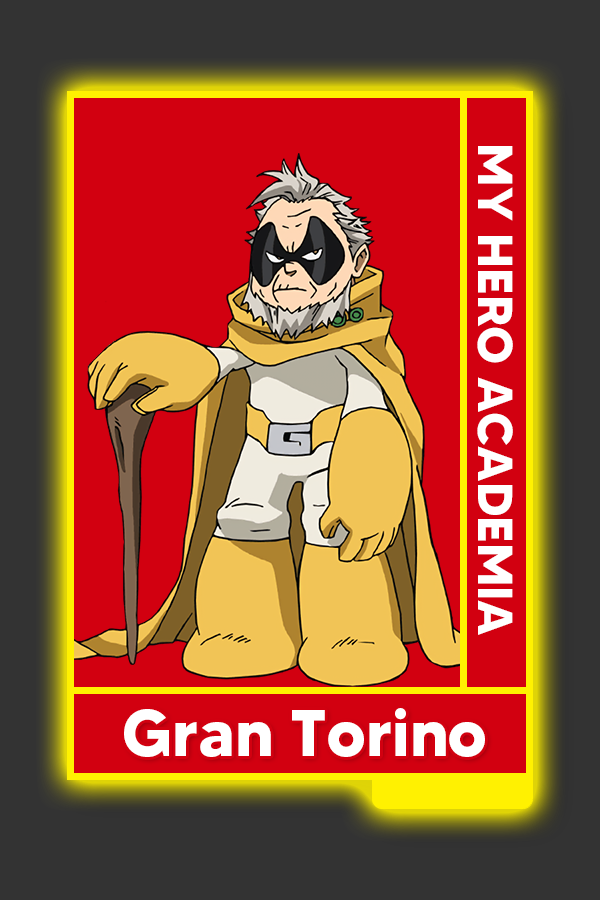
<style>
.page{position:relative;width:600px;height:900px;background:#d20010}
.page>*{position:absolute;margin:0}
.t1{font:48.8px "MADETOMMY-Bold";color:#ffffff}
.t2{font:65.2px "MADETOMMY-Bold";color:#ffffff}
</style>
<div class="page">
<p class="t1" style="left:477px;top:146px;width:36px;height:489px;rotate:90deg">MY HERO ACADEMIA</p>
<p class="t2" style="left:124px;top:708px;width:361px;height:49px">Gran Torino</p>
</div>
